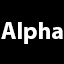
<style>
.page{position:relative;width:64px;height:64px;background:#000000}
.page>*{position:absolute;margin:0}
.t1{font:24px "MyriadHebrew-Bold";color:#ffffff}
</style>
<div class="page">
<p class="t1" style="left:1px;top:22px;width:62px;height:22px">Alpha</p>
</div>
